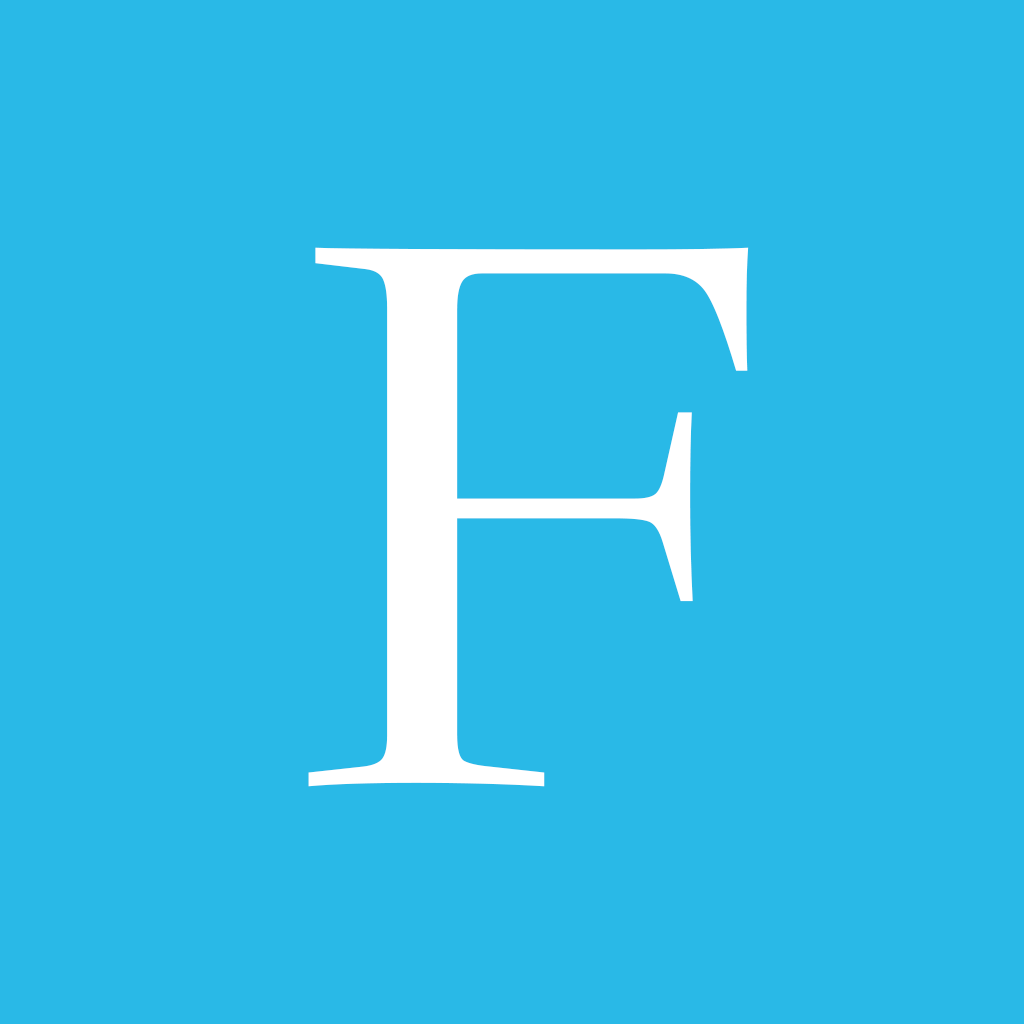
<style>
.page{position:relative;width:1024px;height:1024px;background:#29b9e7}
.page>*{position:absolute;margin:0}
.t1{font:853.3px "STFangsong";color:#ffffff}
</style>
<div class="page">
<p class="t1" style="left:308px;top:247px;width:441px;height:540px">F</p>
</div>
